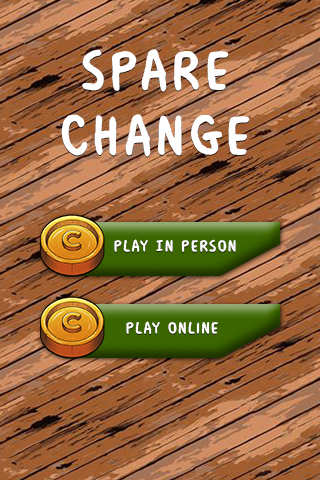
<style>
.page{position:relative;width:320px;height:480px}
.page>*{position:absolute;margin:0}
.t1{font:55px/65px "MilkMustacheBB-Bold";letter-spacing:0.06em;color:#fefefe}
.t2{font:16px "MilkMustacheBB-Bold";letter-spacing:0.06em;color:#fefefe}
</style>
<div class="page">
<p class="t1" style="left:61px;top:49px;width:189px;height:108px;text-align:center">Spare Change</p>
<p class="t2" style="left:114px;top:239px;width:122px;height:13px">Play In Person</p>
<p class="t2" style="left:126px;top:321px;width:92px;height:13px">Play Online</p>
</div>
